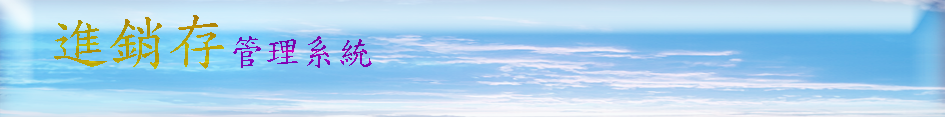
<style>
.page{position:relative;width:945px;height:117px}
.page>*{position:absolute;margin:0}
.t1{font:60px "DFKaiShu-SB-Estd-BF";color:#c08d05}
.t2{font:36px "DFKaiShu-SB-Estd-BF";color:#8302b2}
</style>
<div class="page">
<p class="t1" style="left:54px;top:15px;width:170px;height:54px">進銷存</p>
<p class="t2" style="left:233px;top:36px;width:139px;height:32px">管理系統</p>
</div>
